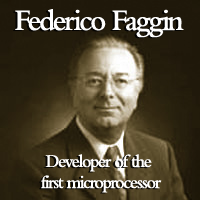
<style>
.page{position:relative;width:200px;height:200px}
.page>*{position:absolute;margin:0}
.t1{font:31.2px "BemboMT-SemiBold";letter-spacing:-0.08em;color:#ffffff;scale:0.95 1}
.t2{font:18.7px/21px "BemboMT-SemiBold";letter-spacing:-0.08em;color:#ffffff;scale:0.95 1}
</style>
<div class="page">
<p class="t1" style="left:15px;top:9px;width:169px;height:29px">Federico Faggin</p>
<p class="t2" style="left:41px;top:154px;width:121px;height:39px;text-align:center">Developer of the <br>first microprocessor</p>
</div>
